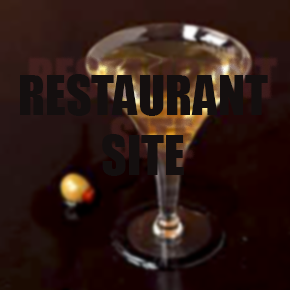
<style>
.page{position:relative;width:290px;height:290px}
.page>*{position:absolute;margin:0}
.t1{font:50px "Impact";color:#140f0f}
</style>
<div class="page">
<p class="t1" style="left:20px;top:74px;width:248px;height:102px;text-align:center">RESTAURANT<br>SITE</p>
</div>
